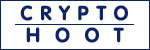
<style>
.page{position:relative;width:150px;height:50px;background:#ffffff}
.page>*{position:absolute;margin:0}
.t1{font:20px "VAGRoundedBT-Regular";letter-spacing:0.025em;color:#0d2567}
</style>
<div class="page">
<p class="t1" style="left:20px;top:5px;width:108px;height:16px">C R Y P T O</p>
<p class="t1" style="left:26px;top:27px;width:98px;height:16px">H  O  O  T</p>
</div>
